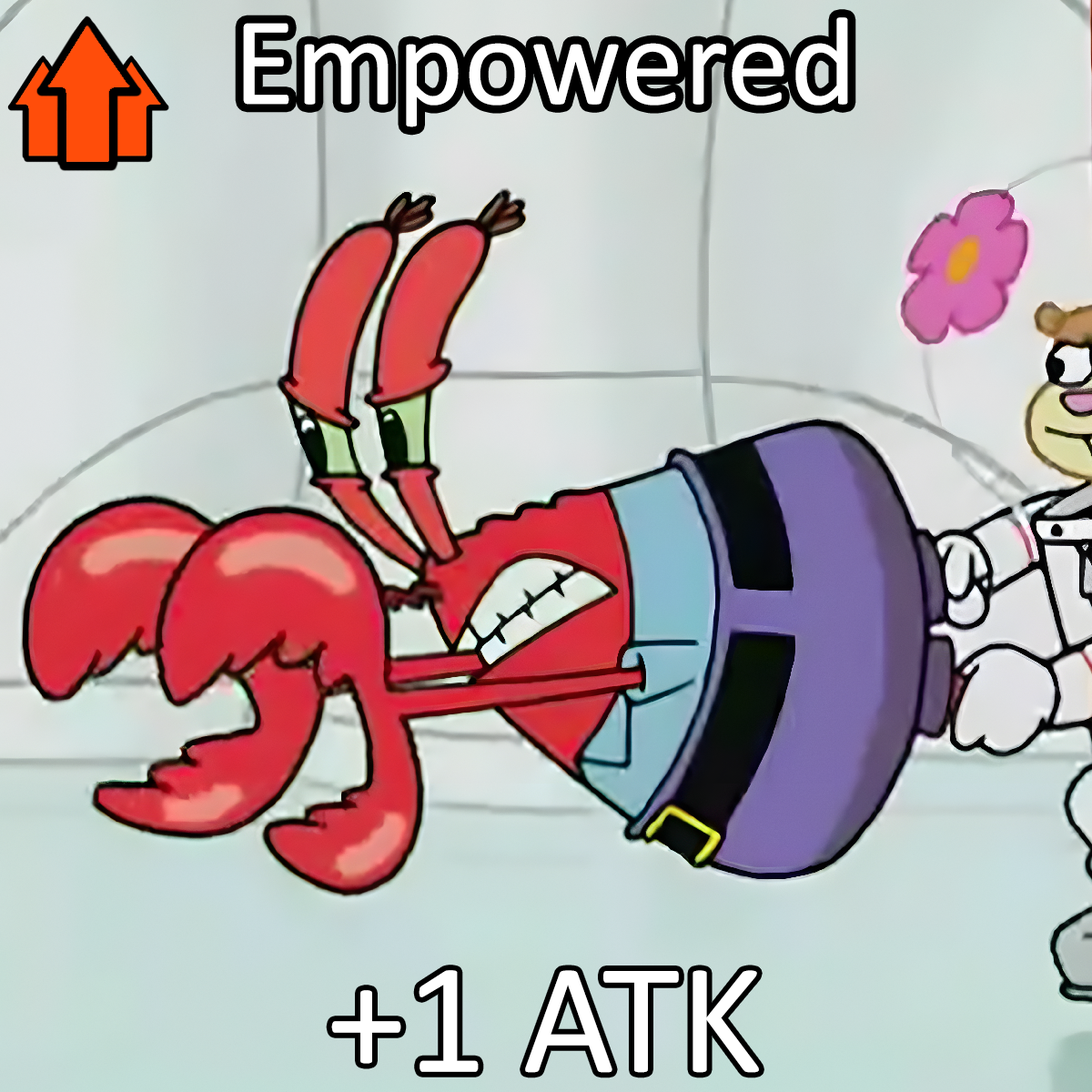
<style>
.page{position:relative;width:1092px;height:1092px}
.page>*{position:absolute;margin:0}
.t1{font:218.4px "Calibri";color:#ffffff}
.t2{font:273px "Calibri";color:#ffffff}
</style>
<div class="page">
<p class="t1" style="left:243px;top:17px;width:605px;height:110px">Empowered</p>
<p class="t2" style="left:331px;top:970px;width:428px;height:103px">+1 ATK</p>
</div>
